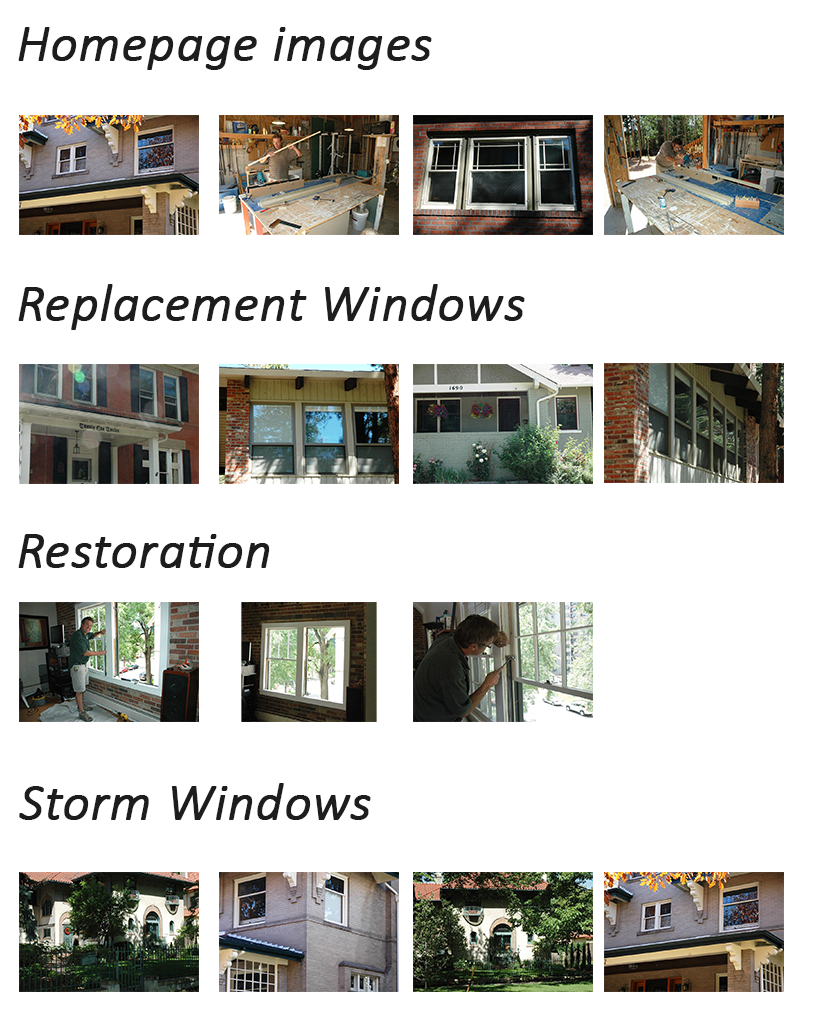
<style>
.page{position:relative;width:815px;height:1032px;background:#ffffff}
.page>*{position:absolute;margin:0}
.t1{font:53px "Calibri-LightItalic";color:#1d1d1d;font-weight:bold}
</style>
<div class="page">
<p class="t1" style="left:18px;top:27px;width:414px;height:43px">Homepage images</p>
<p class="t1" style="left:18px;top:284px;width:507px;height:46px">Replacement Windows</p>
<p class="t1" style="left:18px;top:534px;width:252px;height:34px">Restoration</p>
<p class="t1" style="left:19px;top:783px;width:352px;height:37px">Storm Windows</p>
</div>
